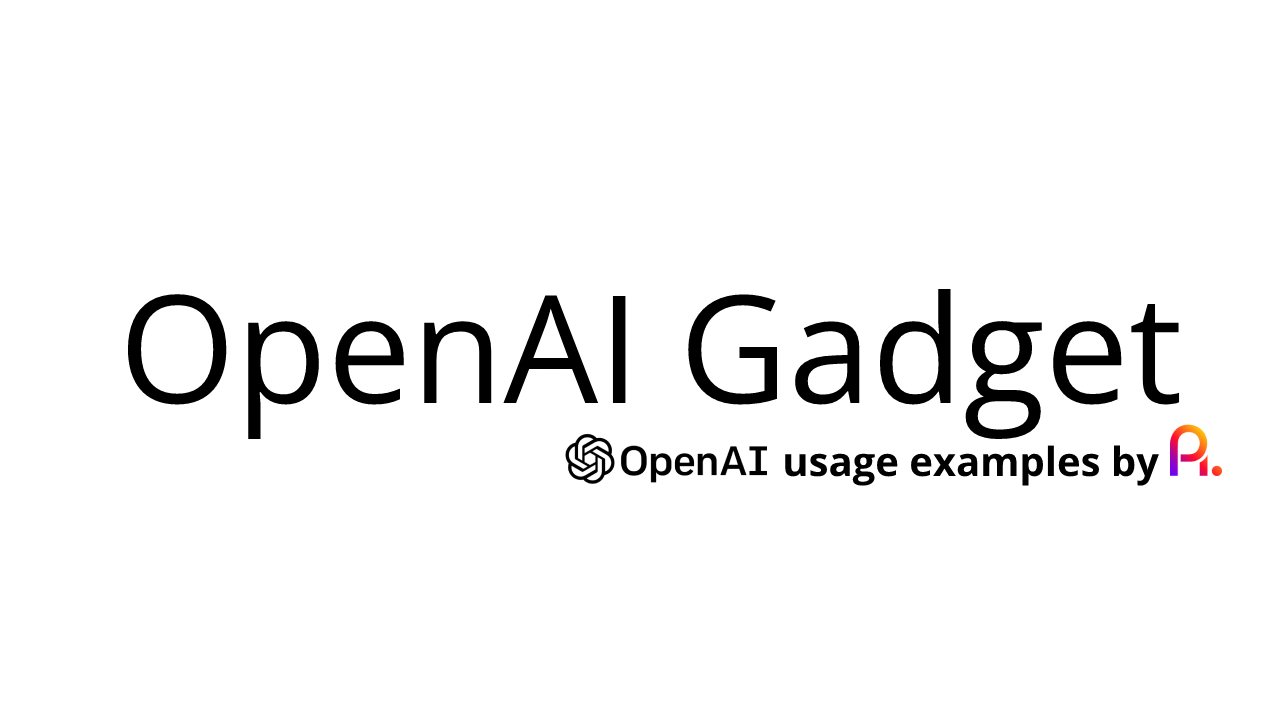
<style>
.page{position:relative;width:1280px;height:720px;background:#ffffff}
.page>*{position:absolute;margin:0}
.t1{font:150px "OpenSans-Regular";color:#000000}
.t2{font:40px "OpenSans-Bold";color:#000000}
</style>
<div class="page">
<p class="t1" style="left:127px;top:289px;width:1053px;height:151px">OpenAI Gadget</p>
<p class="t2" style="left:785px;top:445px;width:374px;height:41px">usage examples by</p>
</div>
